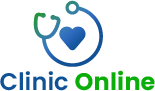
<style>
.page{position:relative;width:155px;height:91px;background:#ffffff}
.page>*{position:absolute;margin:0}
.t1{font:24px "Poppins-SemiBold";letter-spacing:0.005em;color:#115297}
.t2{font:24px "Poppins-Bold";letter-spacing:0.005em;color:#0aad0a}
</style>
<div class="page">
<p class="t1" style="left:0px;top:70px;width:155px;height:21px">Clinic <span class="t2">Online</span></p>
</div>
